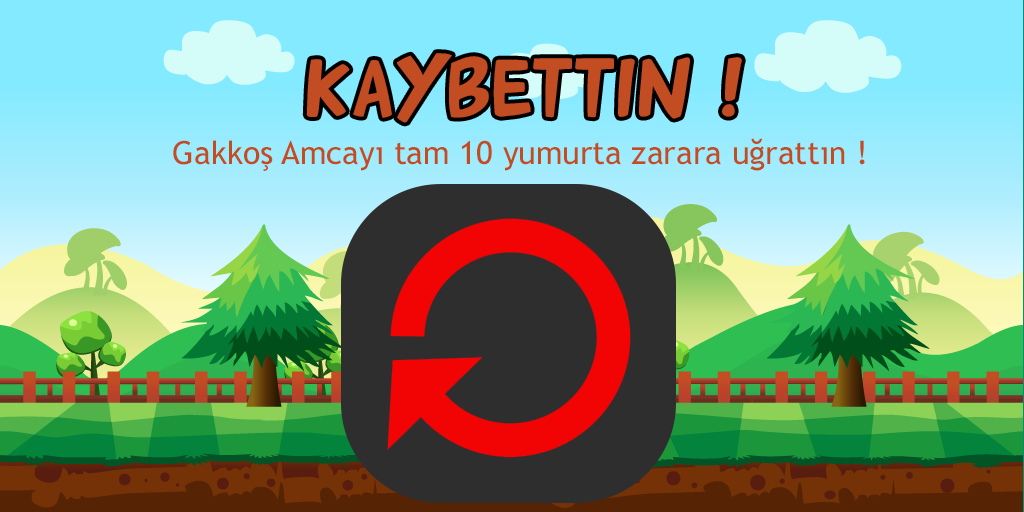
<style>
.page{position:relative;width:1024px;height:512px}
.page>*{position:absolute;margin:0}
.t1{font:81px "Arnold21";color:#c34d23}
.t2{font:32px "TrebuchetMS";color:#c34d23}
</style>
<div class="page">
<p class="t1" style="left:306px;top:53px;width:436px;height:70px">kaybettin !</p>
<p class="t2" style="left:173px;top:138px;width:692px;height:33px">Gakkoş Amcayı tam 10 yumurta zarara uğrattın !</p>
</div>
